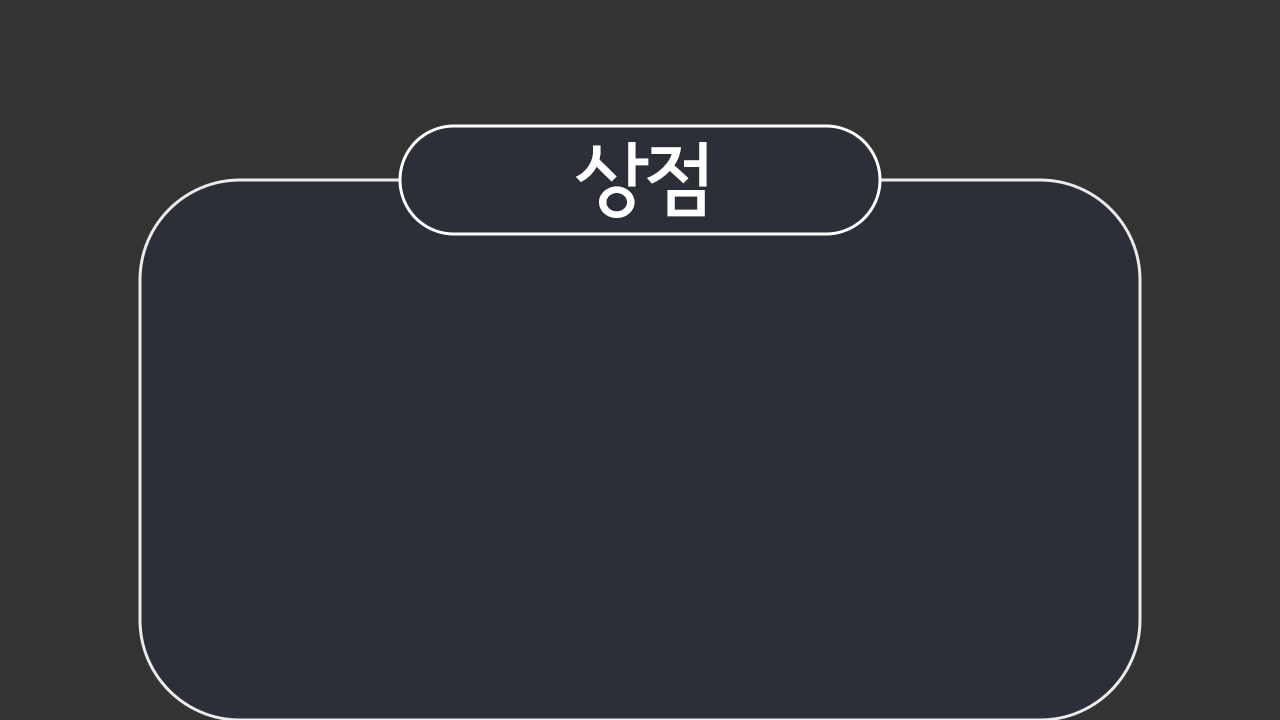
<style>
.page{position:relative;width:1280px;height:720px;background:#2d2f38}
.page>*{position:absolute;margin:0}
.t1{font:80px "SeoulNamsanB";letter-spacing:-0.02em;color:#ffffff}
</style>
<div class="page">
<p class="t1" style="left:576px;top:142px;width:131px;height:76px">상점</p>
</div>
